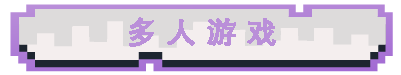
<style>
.page{position:relative;width:401px;height:75px;background:#dddbdb}
.page>*{position:absolute;margin:0}
.t1{font:30px "DengXian-Bold";color:#ba8fd9;font-weight:bold}
</style>
<div class="page">
<p class="t1" style="left:129px;top:17px;width:147px;height:30px">多 人 游 戏</p>
</div>
